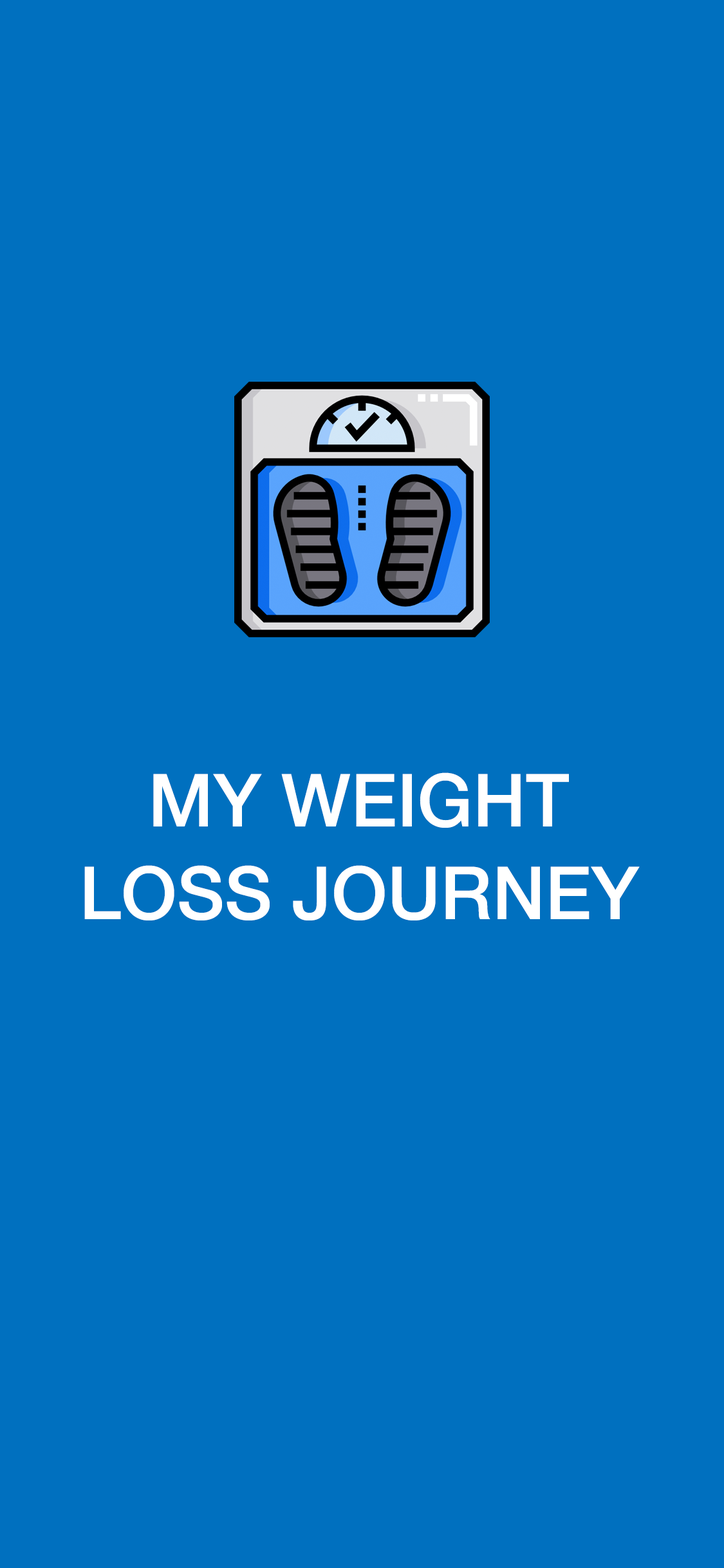
<style>
.page{position:relative;width:724px;height:1568px;background:#0070bf}
.page>*{position:absolute;margin:0}
.t1{font:73.4px/87.5px "HelveticaNeue-Medium";color:#ffffff;text-transform:uppercase}
</style>
<div class="page">
<p class="t1" style="left:84px;top:772px;width:556px;height:148px;text-align:center">my weight<br>loss journey</p>
</div>
